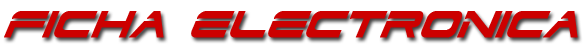
<style>
.page{position:relative;width:588px;height:48px;background:#ffffff}
.page>*{position:absolute;margin:0}
.t1{font:44px "DodgerCondensedItalic";color:#cc0000;font-weight:bold}
</style>
<div class="page">
<p class="t1" style="left:4px;top:11px;width:574px;height:27px">FICHA ELECTRONICA</p>
</div>
